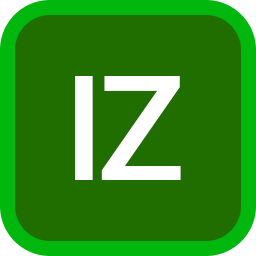
<style>
.page{position:relative;width:256px;height:256px;background:#206d00}
.page>*{position:absolute;margin:0}
.t1{font:160px "Kanit-Regular";letter-spacing:-0.05em;color:#ffffff}
</style>
<div class="page">
<p class="t1" style="left:75px;top:76px;width:106px;height:104px">IZ</p>
</div>
